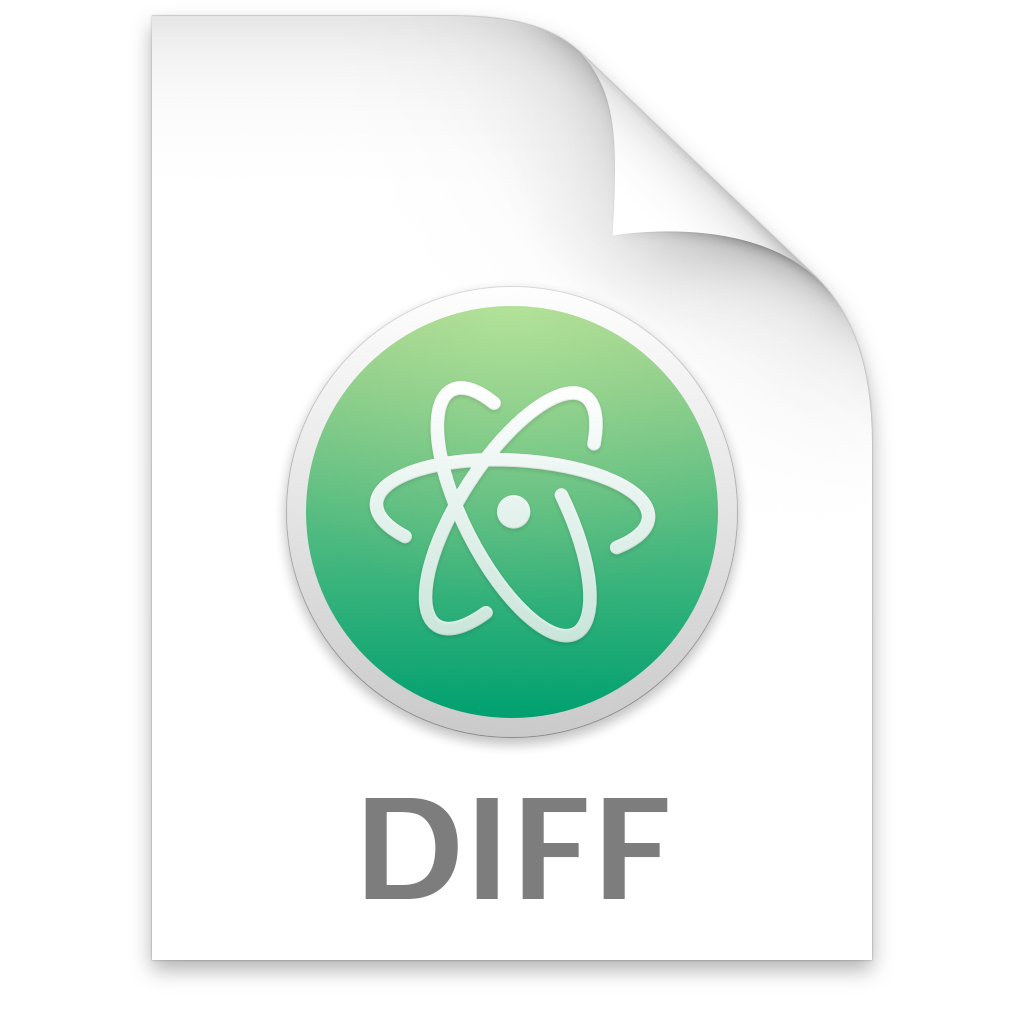
<style>
.page{position:relative;width:1024px;height:1024px;background:#ffffff}
.page>*{position:absolute;margin:0}
.t1{font:140px "LucidaGrande-Bold";color:#7d7d7d}
</style>
<div class="page">
<p class="t1" style="left:365px;top:798px;width:303px;height:101px">DIFF</p>
</div>
